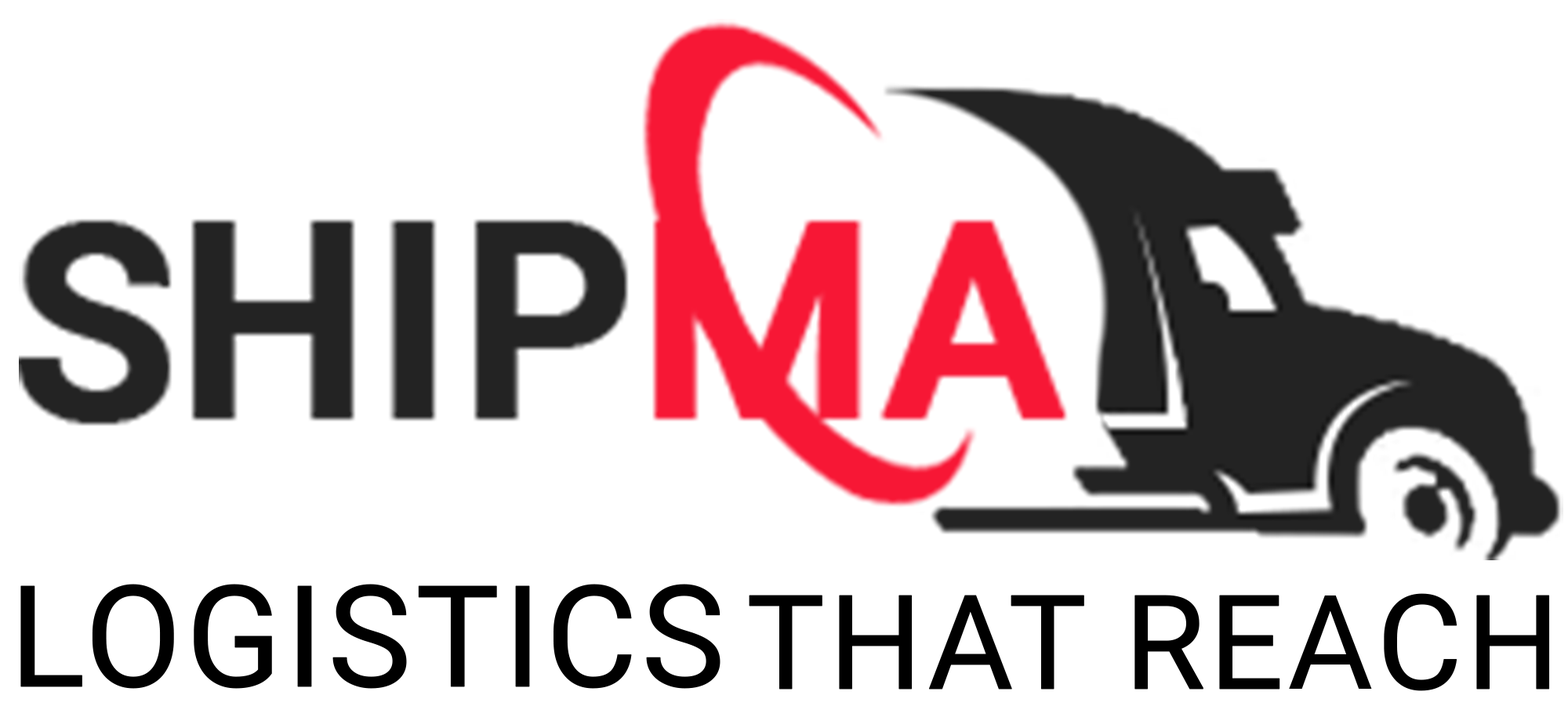
<style>
.page{position:relative;width:1568px;height:706px;background:#ffffff}
.page>*{position:absolute;margin:0}
.t1{font:141.3px "Roboto-Regular";color:#000000;text-transform:uppercase;font-weight:bold}
.t2{font:131.9px "Roboto-Regular";color:#000000;text-transform:uppercase;font-weight:bold}
</style>
<div class="page">
<p class="t1" style="left:20px;top:584px;width:700px;height:105px">Logistics</p>
<p class="t2" style="left:749px;top:593px;width:801px;height:98px">That Reach</p>
</div>
